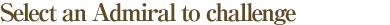
<style>
.page{position:relative;width:390px;height:25px;background:#ffffff}
.page>*{position:absolute;margin:0}
.t1{font:24px "RyuminPro-ExBold";letter-spacing:-0.08em;color:#5f4a23}
</style>
<div class="page">
<p class="t1" style="left:0px;top:3px;width:296px;height:22px">Select an Admiral to challenge</p>
</div>
